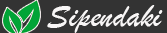
<style>
.page{position:relative;width:167px;height:33px;background:#333333}
.page>*{position:absolute;margin:0}
.t1{font:34px "BrushScriptMT";color:#f8f6f6}
</style>
<div class="page">
<p class="t1" style="left:47px;top:5px;width:116px;height:28px">Sipendaki</p>
</div>
